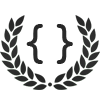
<style>
.page{position:relative;width:100px;height:100px;background:#ffffff}
.page>*{position:absolute;margin:0}
.t1{font:49.4px "Courier";color:#292929}
</style>
<div class="page">
<p class="t1" style="left:26px;top:24px;width:47px;height:40px">{}</p>
</div>
